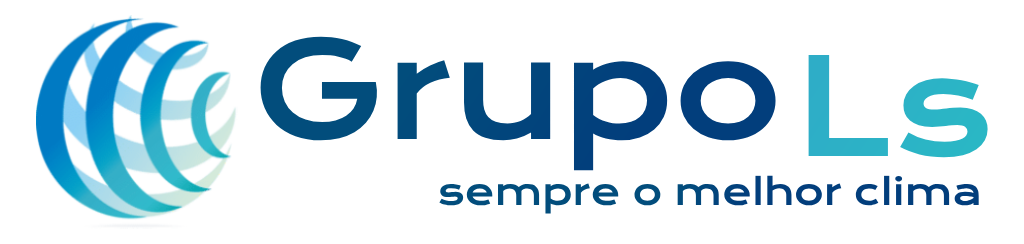
<style>
.page{position:relative;width:1024px;height:244px;background:#ffffff}
.page>*{position:absolute;margin:0}
.t1{font:132.5px "KronaOne-Regular";color:#02447c}
.t2{font:132.5px "KronaOne-Regular";color:#2cb3c6}
.t3{font:36px "KronaOne-Regular";color:#02467c}
</style>
<div class="page">
<p class="t1" style="left:260px;top:36px;width:516px;height:135px">Grupo</p>
<p class="t2" style="left:808px;top:55px;width:180px;height:103px">Ls</p>
<p class="t3" style="left:439px;top:175px;width:540px;height:39px">sempre o melhor clima</p>
</div>
